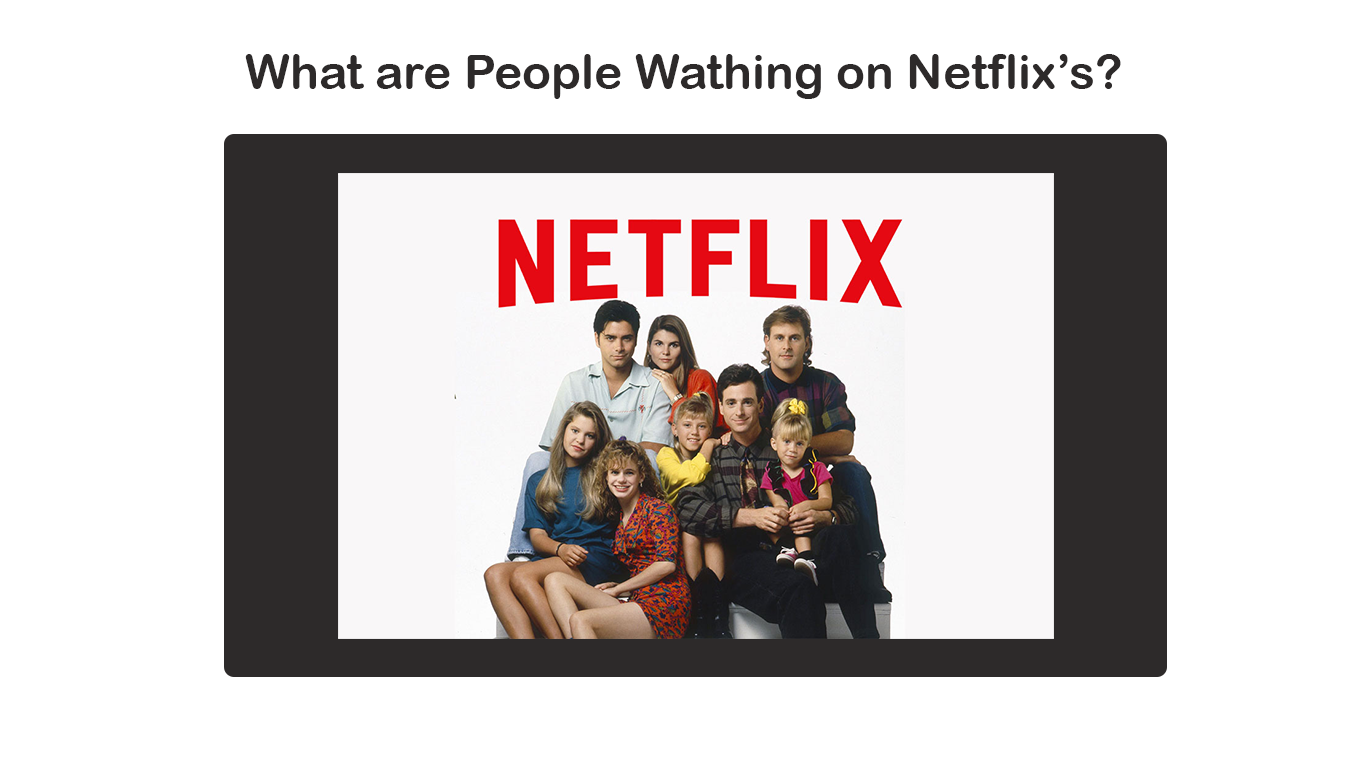
<style>
.page{position:relative;width:1366px;height:768px;background:#ffffff}
.page>*{position:absolute;margin:0}
.t1{font:48px "ArialRoundedMTBold";color:#2d2a2a}
</style>
<div class="page">
<p class="t1" style="left:245px;top:54px;width:876px;height:45px">What are People Wathing on Netflix’s?</p>
</div>
